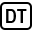
<style>
.page{position:relative;width:32px;height:32px;background:#ffffff}
.page>*{position:absolute;margin:0}
.t1{font:20px "ArialNarrow-Bold";color:#000000}
</style>
<div class="page">
<p class="t1" style="left:6px;top:9px;width:21px;height:14px">DT</p>
</div>
